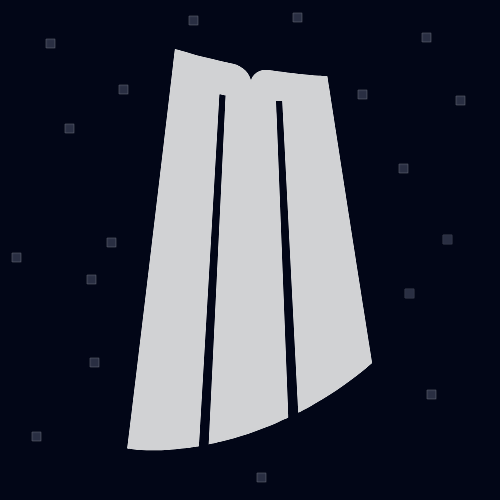
<style>
.page{position:relative;width:500px;height:500px;background:#020617}
.page>*{position:absolute;margin:0}
.t1{font:338.6px "Nagasaki";color:#d1d2d4;scale:1.55 1}
</style>
<div class="page">
<p class="t1" style="left:127px;top:49px;width:245px;height:402px">M</p>
</div>
